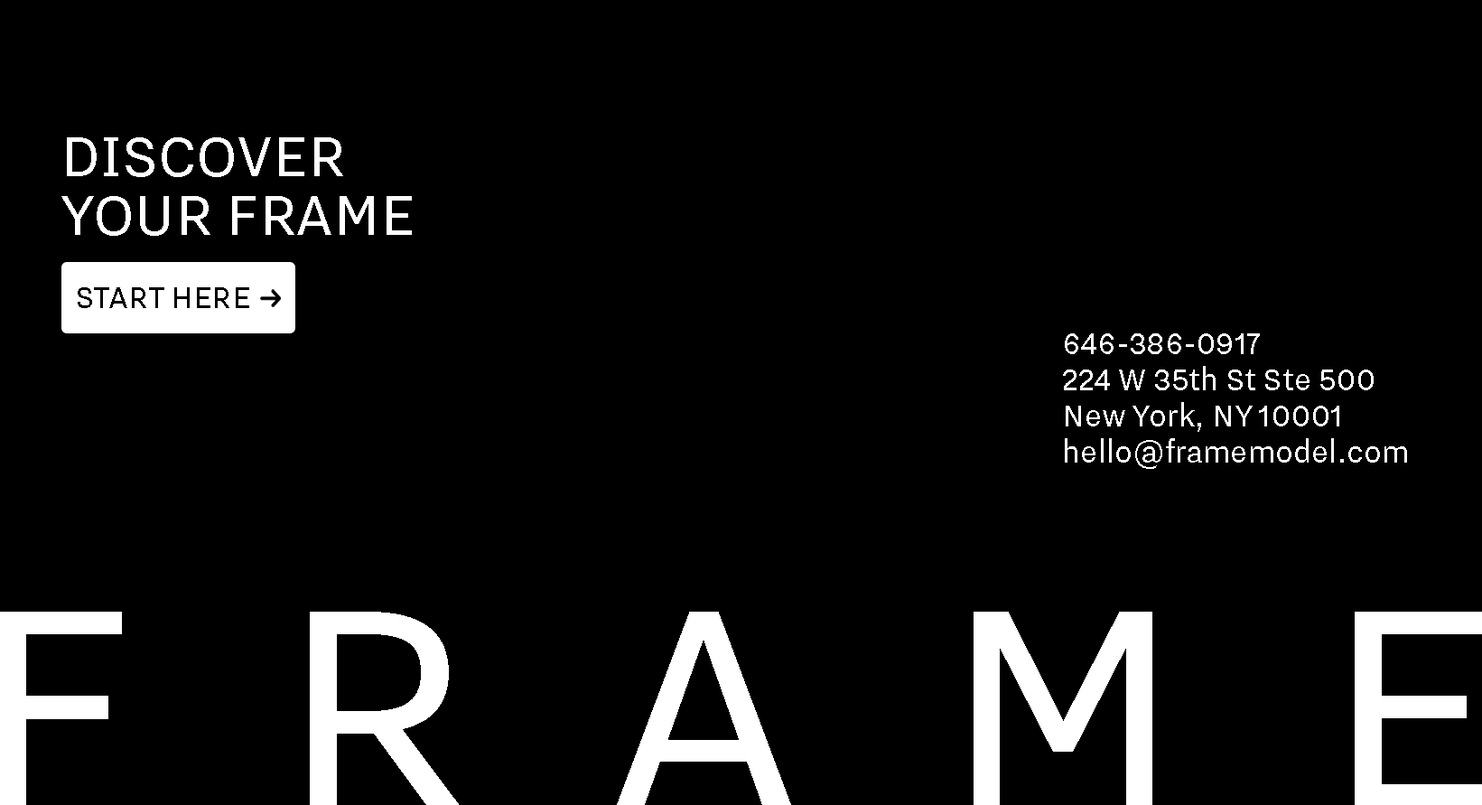
<style>
.page{position:relative;width:1482px;height:805px;background:#000000}
.page>*{position:absolute;margin:0}
.t1{font:67.7px/58.7px "NittiGrotesk-Regular";color:#ffffff}
.t2{font:36.1px "NittiGrotesk-Regular";color:#000000}
.t3{font:36.1px/36.1px "NittiGrotesk-Regular";color:#ffffff}
</style>
<div class="page">
<p class="t1" style="left:61px;top:137px;width:351px;height:99px">DISCOVER <br>YOUR FRAME</p>
<p class="t2" style="left:78px;top:287px;width:171px;height:21px">START HERE</p>
<p class="t3" style="left:1063px;top:333px;width:344px;height:136px">646-386-0917 <br>224 W 35th St Ste 500<br>New York, NY 10001<br>hello@framemodel.com</p>
</div>
